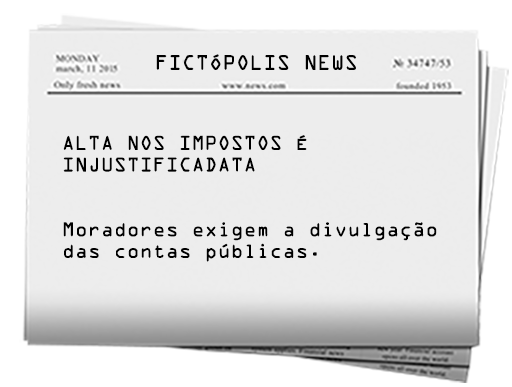
<style>
.page{position:relative;width:512px;height:387px;background:#ededed}
.page>*{position:absolute;margin:0}
.t1{font:18.8px "OCRAStd";color:#000000}
.t2{font:18px "OCRAStd";color:#000000}
</style>
<div class="page">
<p class="t1" style="left:156px;top:54px;width:200px;height:16px">FICTÓPOLIS NEWS</p>
<p class="t2" style="left:63px;top:135px;width:374px;height:127px">ALTA NOS IMPOSTOS É<br>INJUSTIFICADATA <br><br><br>Moradores exigem a divulgação <br>das contas públicas.</p>
</div>
